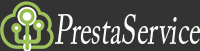
<style>
.page{position:relative;width:200px;height:51px;background:#333333}
.page>*{position:absolute;margin:0}
.t1{font:41.5px "ACaslonPro-Regular";color:#f8fef7;font-style:italic;scale:0.66 1}
</style>
<div class="page">
<p class="t1" style="left:55px;top:14px;width:146px;height:30px">PrestaService</p>
</div>
